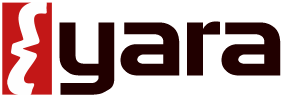
<style>
.page{position:relative;width:285px;height:96px;background:#ffffff}
.page>*{position:absolute;margin:0}
.t1{font:100px "Longview";color:#220000;scale:1.09 1}
</style>
<div class="page">
<p class="t1" style="left:59px;top:21px;width:222px;height:74px">yara</p>
</div>
